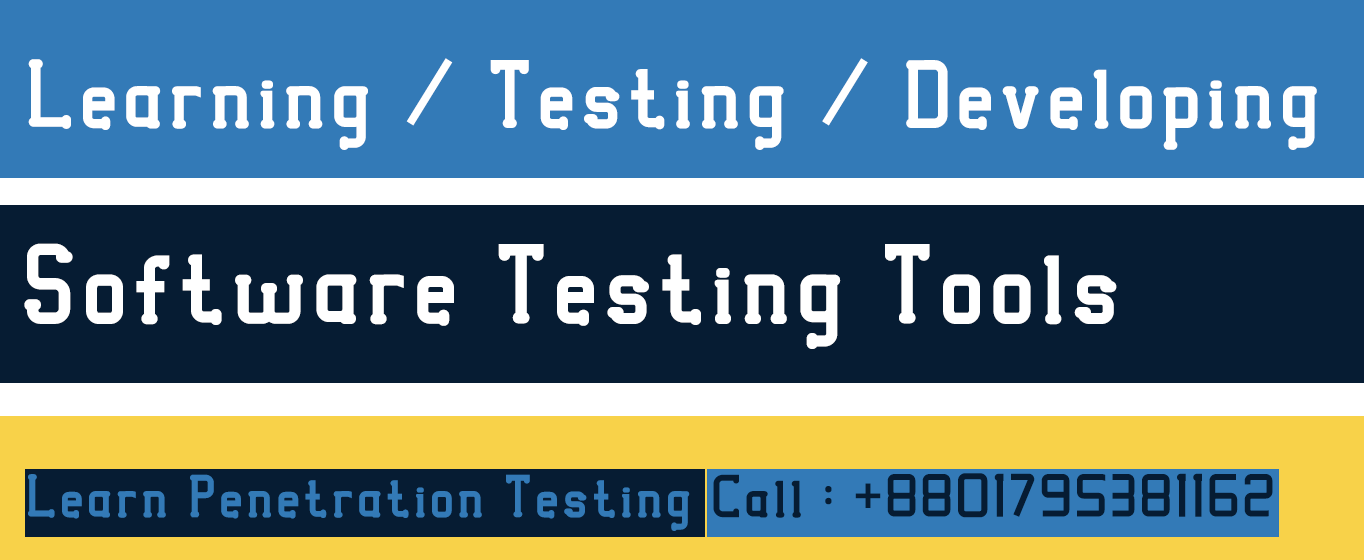
<style>
.page{position:relative;width:1364px;height:560px;background:#061c33}
.page>*{position:absolute;margin:0}
.t1{font:91px "VICTORISABold";letter-spacing:0.025em;color:#ffffff}
.t2{font:106px "VICTORISABold";letter-spacing:0.025em;color:#ffffff}
</style>
<div class="page">
<p class="t1" style="left:28px;top:58px;width:1289px;height:92px">Learning / Testing / Developing</p>
<p class="t2" style="left:24px;top:243px;width:1093px;height:106px">Software Testing Tools</p>
</div>
